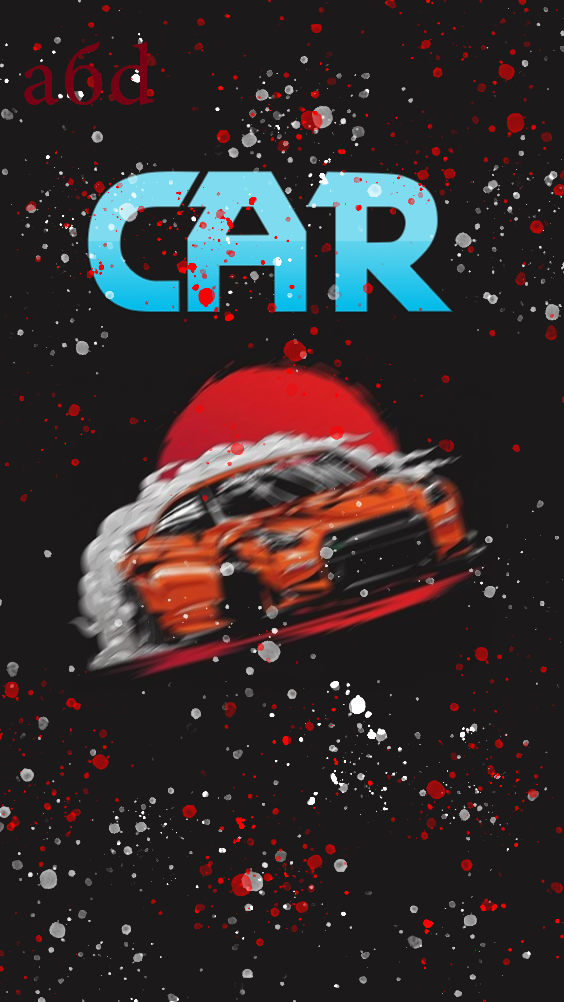
<style>
.page{position:relative;width:564px;height:1002px;background:#1b191a}
.page>*{position:absolute;margin:0}
.t1{font:87.7px "MinionPro-Regular";letter-spacing:0.025em;color:#780014}
.t2{font:201px "VEZTRORegular";letter-spacing:0.025em}
</style>
<div class="page">
<p class="t1" style="left:24px;top:41px;width:130px;height:64px">абd</p>
<p class="t2" style="left:87px;top:171px;width:366px;height:141px">CAR</p>
</div>
